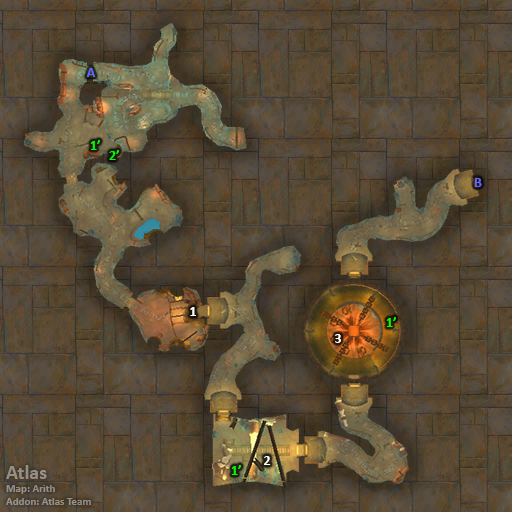
<style>
.page{position:relative;width:512px;height:512px}
.page>*{position:absolute;margin:0}
.t1{font:14px "Calibri-Bold";color:#6666ff}
.t2{font:14px "Calibri-Bold";color:#00ff00}
.t3{font:14px "Calibri-Bold";color:#ffffff}
.t4{font:11px "Calibri-Bold";color:#968f86}
.t5{font:20px "Calibri-Bold";color:#968f86}
</style>
<div class="page">
<p class="t1" style="left:86px;top:68px;width:9px;height:9px">A</p>
<p class="t2" style="left:90px;top:140px;width:10px;height:10px">1’</p>
<p class="t2" style="left:109px;top:150px;width:10px;height:10px">2’</p>
<p class="t1" style="left:474px;top:178px;width:8px;height:9px">B</p>
<p class="t3" style="left:190px;top:307px;width:6px;height:9px">1</p>
<p class="t2" style="left:386px;top:317px;width:10px;height:10px">1’</p>
<p class="t3" style="left:335px;top:334px;width:6px;height:9px">3</p>
<p class="t3" style="left:264px;top:456px;width:7px;height:9px">2</p>
<p class="t4" style="left:6px;top:465px;width:85px;height:40px"><span class="t5">Atlas<br></span>Map: Arith<br>Addon: Atlas Team</p>
<p class="t2" style="left:231px;top:465px;width:10px;height:10px">1’</p>
</div>
